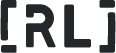
<style>
.page{position:relative;width:116px;height:53px;background:#ffffff}
.page>*{position:absolute;margin:0}
.t1{font:60px "LEIXO-Bold";color:#23272a}
</style>
<div class="page">
<p class="t1" style="left:0px;top:0px;width:116px;height:53px">[RL]</p>
</div>
